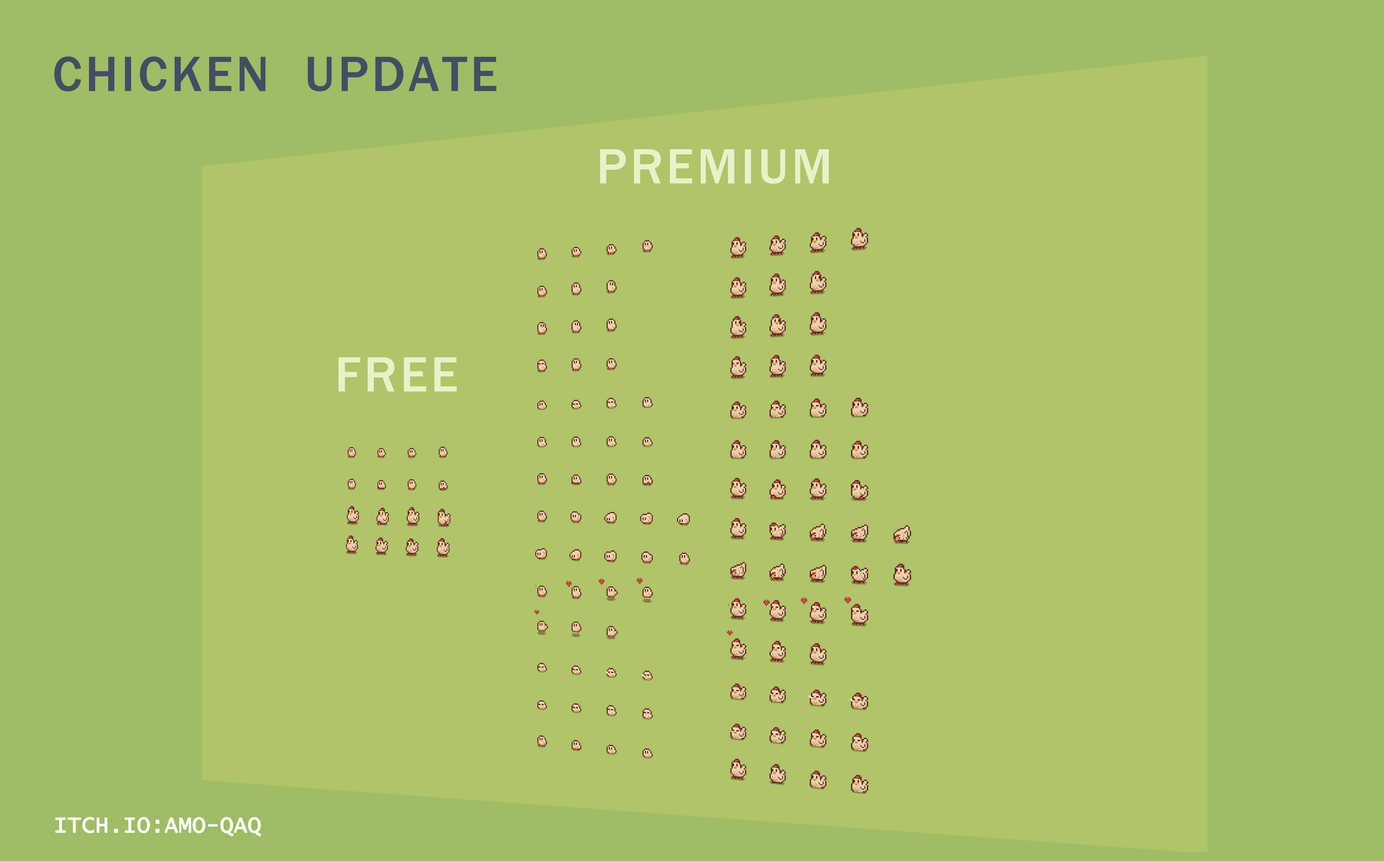
<style>
.page{position:relative;width:1384px;height:861px;background:#b0c468}
.page>*{position:absolute;margin:0}
.t1{font:51.3px "FranklinGothic-Medium";letter-spacing:0.06em;color:#434e65;text-transform:uppercase}
.t2{font:51.3px "FranklinGothic-Medium";letter-spacing:0.06em;color:#e9f1c9;text-transform:uppercase}
.t3{font:23.4px "LucidaConsole";color:#ffffff;text-transform:uppercase;font-weight:bold;scale:0.94 1}
</style>
<div class="page">
<p class="t1" style="left:54px;top:56px;width:442px;height:35px">chicken  update</p>
<p class="t2" style="left:600px;top:149px;width:229px;height:35px">premium</p>
<p class="t2" style="left:338px;top:357px;width:119px;height:35px">free</p>
<p class="t3" style="left:55px;top:817px;width:207px;height:20px">ITCH.IO:aMO-qaq</p>
</div>
